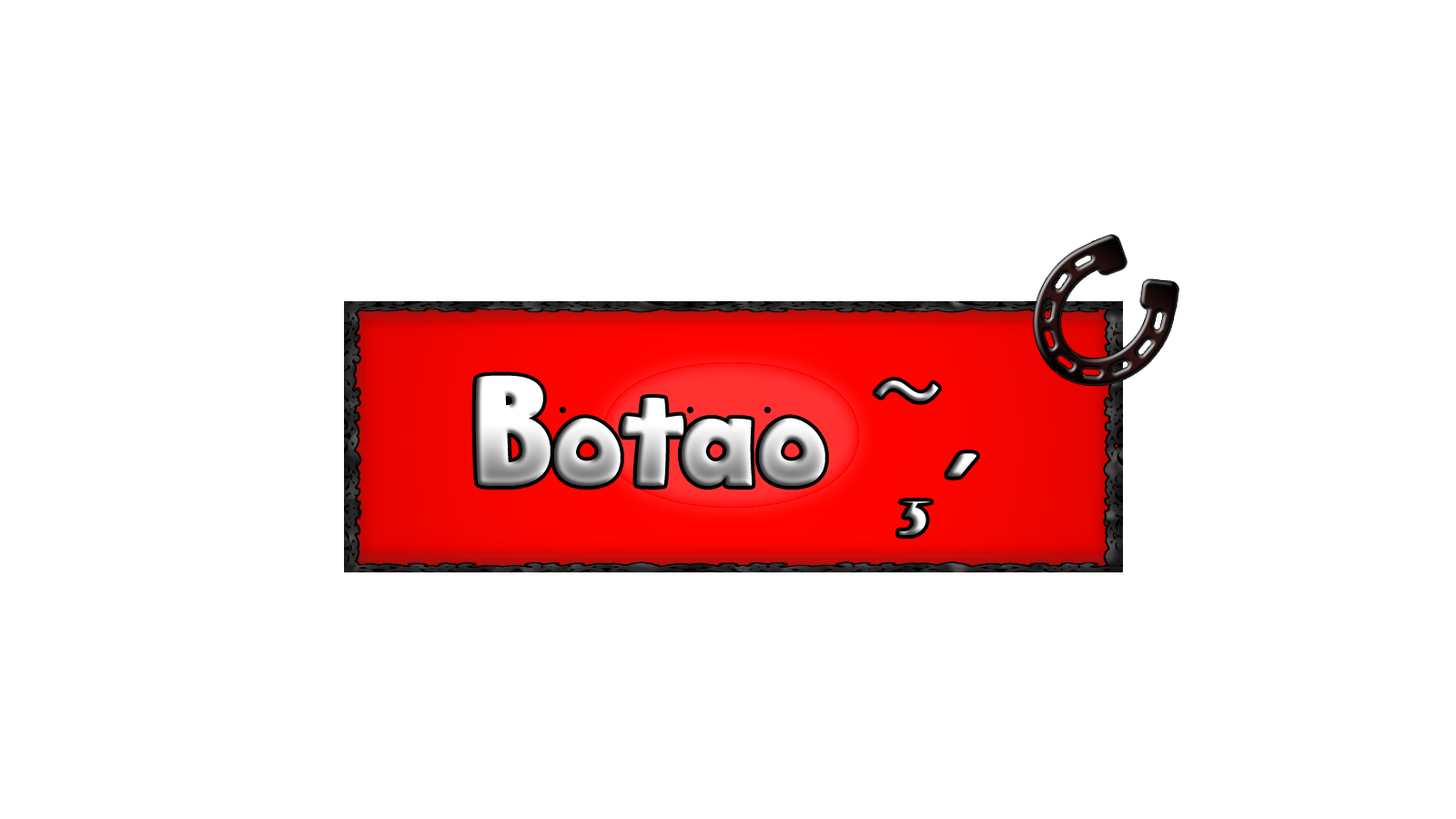
<style>
.page{position:relative;width:1456px;height:819px;background:#ffffff}
.page>*{position:absolute;margin:0}
.t1{font:93.9px "Big_Bottom_Cartoon"}
</style>
<div class="page">
<p class="t1" style="left:475px;top:375px;width:350px;height:111px">Botao</p>
</div>
